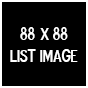
<style>
.page{position:relative;width:88px;height:88px;background:#000000}
.page>*{position:absolute;margin:0}
.t1{font:18px "BlueHighwayDType";color:#ffffff}
</style>
<div class="page">
<p class="t1" style="left:10px;top:27px;width:68px;height:35px;text-align:center">88 x 88<br>LIST IMAGE</p>
</div>
